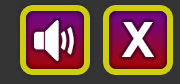
<style>
.page{position:relative;width:180px;height:84px;background:#333333}
.page>*{position:absolute;margin:0}
.t1{font:48px "Arial-BoldMT";color:#ffffff;text-transform:uppercase}
</style>
<div class="page">
<p class="t1" style="left:122px;top:22px;width:32px;height:35px">X</p>
</div>
